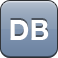
<style>
.page{position:relative;width:58px;height:58px}
.page>*{position:absolute;margin:0}
.t1{font:28px "HelveticaNeue-Bold";color:#ffffff}
</style>
<div class="page">
<p class="t1" style="left:10px;top:20px;width:39px;height:20px">DB</p>
</div>
